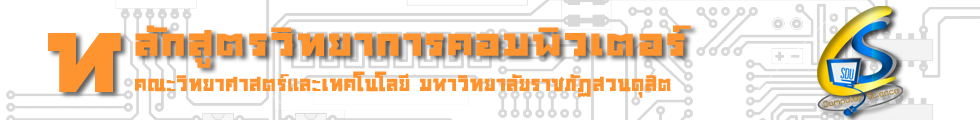
<style>
.page{position:relative;width:980px;height:120px;background:#ffffff}
.page>*{position:absolute;margin:0}
.t1{font:45px "05_ZZHouKang";color:#fd9430;scale:1.2 1}
.t2{font:120px "05_ZZHouKang";color:#fd9430;scale:1.2 1}
.t3{font:25px "05_ZZHouKang";color:#fd9430}
</style>
<div class="page">
<p class="t1" style="left:135px;top:25px;width:556px;height:43px">ลักสูตรวิทยาการคอมพิวเตอร์</p>
<p class="t2" style="left:48px;top:33px;width:73px;height:59px">ห</p>
<p class="t3" style="left:135px;top:71px;width:536px;height:27px">คณะวิทยาศาสตร์และเทคโนโลยี มหาวิทยาลัยราชภัฏสวนดุสิต</p>
</div>
